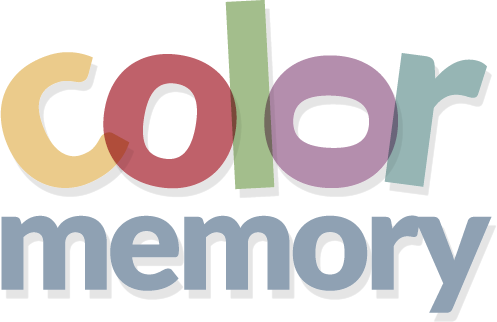
<style>
.page{position:relative;width:497px;height:322px;background:#ffffff}
.page>*{position:absolute;margin:0}
.t1{font:250px "Lato-Black";color:#a3be8c}
.t2{font:250px "Lato-Black";color:#ebcb8b}
.t3{font:250px "Lato-Black";color:#bf616a}
.t4{font:250px "Lato-Black";color:#96b5b4}
.t5{font:250px "Lato-Black";color:#b48ead}
.t6{font:140px "Lato-Black";letter-spacing:-0.05em;color:#8fa1b3}
</style>
<div class="page">
<p class="t1" style="left:225px;top:0px;width:50px;height:190px;rotate:-3deg">l</p>
<p class="t2" style="left:0px;top:52px;width:130px;height:136px;rotate:-23deg">c</p>
<p class="t3" style="left:103px;top:54px;width:134px;height:135px;rotate:9deg">o</p>
<p class="t4" style="left:384px;top:53px;width:103px;height:134px;rotate:8deg">r</p>
<p class="t5" style="left:264px;top:55px;width:134px;height:133px;rotate:-88deg">o</p>
<p class="t6" style="left:1px;top:215px;width:491px;height:98px">memory</p>
</div>
